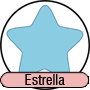
<style>
.page{position:relative;width:90px;height:90px;background:#ffffff}
.page>*{position:absolute;margin:0}
.t1{font:14.7px "Swiss721BT-RomanCondensed";color:#000000}
</style>
<div class="page">
<p class="t1" style="left:25px;top:74px;width:40px;height:11px">Estrella</p>
</div>
